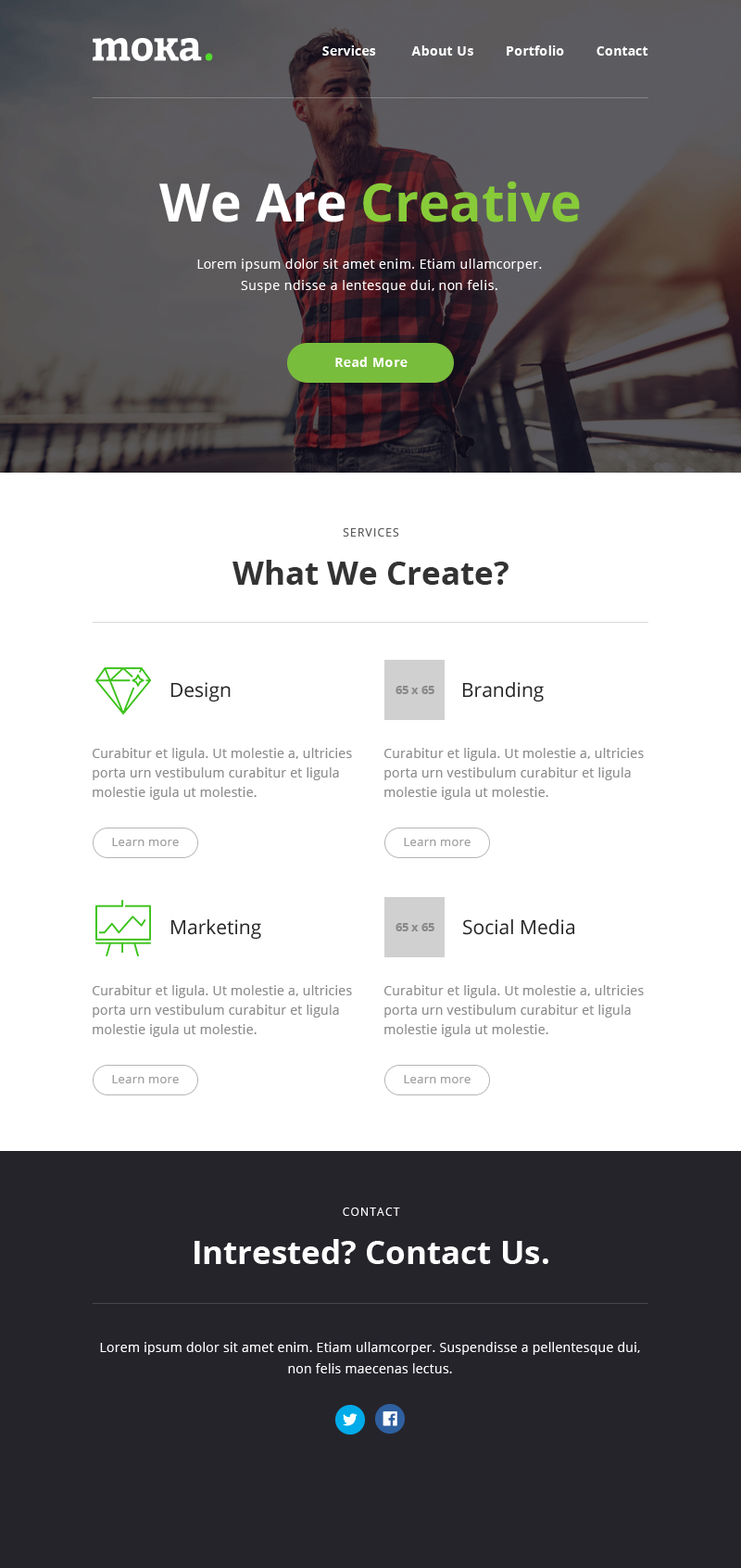
<style>
.page{position:relative;width:741px;height:1568px;background:#ffffff}
.page>*{position:absolute;margin:0}
.t1{font:13px "OpenSans-Bold";letter-spacing:0.02em;color:#ffffff}
.t2{font:52.8px "OpenSans-Bold";color:#88cb39}
.t3{font:52.8px "OpenSans-Bold";color:#ffffff}
.t4{font:13px/21.3px "OpenSans";letter-spacing:0.02em;color:#ffffff}
.t5{font:13px "OpenSans-Bold";letter-spacing:0.04em;color:#ffffff}
.t6{font:11.1px "OpenSans";letter-spacing:0.1em;color:#5b5b5b;text-transform:uppercase}
.t7{font:32.4px "OpenSans-Bold";color:#333333}
.t8{font:19.5px "OpenSans";color:#262626}
.t9{font:12px "OpenSans-Bold";color:#8a8a8a}
.t10{font:13px/19.5px "OpenSans";letter-spacing:0.02em;color:#8d8d8d}
.t11{font:12px "OpenSans";letter-spacing:0.02em;color:#8e8787}
.t12{font:11.1px "OpenSans";letter-spacing:0.1em;color:#ffffff;text-transform:uppercase}
.t13{font:32.4px "OpenSans-Bold";color:#ffffff}
</style>
<div class="page">
<p class="t1" style="left:322px;top:45px;width:327px;height:11px">Services         About Us        Portfolio        Contact</p>
<p class="t2" style="left:159px;top:181px;width:421px;height:41px"><span class="t3">We Are </span>Creative</p>
<p class="t4" style="left:197px;top:259px;width:345px;height:34px;text-align:center">Lorem ipsum dolor sit amet enim. Etiam ullamcorper. Suspe ndisse a lentesque dui, non felis.</p>
<p class="t5" style="left:335px;top:357px;width:73px;height:10px">Read More</p>
<p class="t6" style="left:343px;top:528px;width:56px;height:9px">SERVICES</p>
<p class="t7" style="left:233px;top:560px;width:276px;height:25px">What We Create?</p>
<p class="t8" style="left:171px;top:682px;width:60px;height:20px">Design</p>
<p class="t9" style="left:396px;top:686px;width:39px;height:8px">65 x 65</p>
<p class="t8" style="left:463px;top:682px;width:81px;height:20px">Branding</p>
<p class="t10" style="left:93px;top:748px;width:259px;height:52px">Curabitur et ligula. Ut molestie a, ultricies porta urn vestibulum curabitur et ligula molestie igula ut molestie.</p>
<p class="t10" style="left:385px;top:748px;width:259px;height:52px">Curabitur et ligula. Ut molestie a, ultricies porta urn vestibulum curabitur et ligula molestie igula ut molestie.</p>
<p class="t11" style="left:112px;top:838px;width:67px;height:8px">Learn more</p>
<p class="t11" style="left:404px;top:838px;width:67px;height:8px">Learn more</p>
<p class="t8" style="left:171px;top:919px;width:90px;height:20px">Marketing</p>
<p class="t9" style="left:396px;top:923px;width:39px;height:8px">65 x 65</p>
<p class="t8" style="left:463px;top:919px;width:112px;height:16px">Social Media</p>
<p class="t10" style="left:93px;top:985px;width:259px;height:52px">Curabitur et ligula. Ut molestie a, ultricies porta urn vestibulum curabitur et ligula molestie igula ut molestie.</p>
<p class="t10" style="left:385px;top:985px;width:259px;height:52px">Curabitur et ligula. Ut molestie a, ultricies porta urn vestibulum curabitur et ligula molestie igula ut molestie.</p>
<p class="t11" style="left:112px;top:1075px;width:67px;height:8px">Learn more</p>
<p class="t11" style="left:404px;top:1075px;width:67px;height:8px">Learn more</p>
<p class="t12" style="left:343px;top:1208px;width:57px;height:8px">Contact</p>
<p class="t13" style="left:195px;top:1239px;width:354px;height:25px">Intrested? Contact Us.</p>
<p class="t4" style="left:100px;top:1342px;width:540px;height:31px;text-align:center">Lorem ipsum dolor sit amet enim. Etiam ullamcorper. Suspendisse a pellentesque dui, non felis maecenas lectus.</p>
</div>
